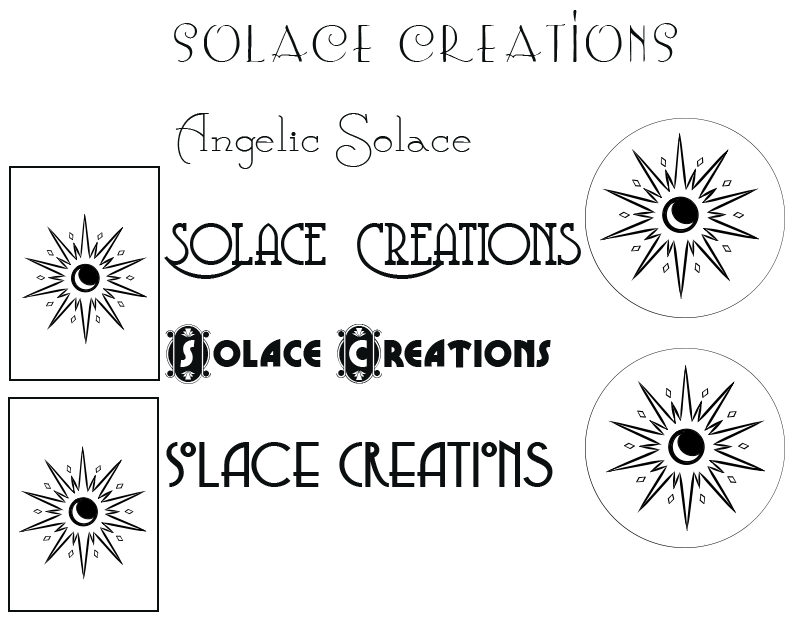
<style>
.page{position:relative;width:798px;height:628px;background:#ffffff}
.page>*{position:absolute;margin:0}
.t1{font:48px "LemonChicken";color:#0b0f10}
.t2{font:60px "CalamityJaneNF";color:#0b0f10}
.t3{font:60px "CoventryGardenNF";color:#0b0f10}
.t4{font:60px "CameoAppearanceNF";color:#0b0f10}
.t5{font:60px "CopaseticNF";color:#0b0f10}
</style>
<div class="page">
<p class="t1" style="left:174px;top:10px;width:503px;height:52px">Solace Creations</p>
<p class="t2" style="left:175px;top:113px;width:296px;height:56px">Angelic Solace</p>
<p class="t3" style="left:164px;top:223px;width:417px;height:56px">Solace Creations</p>
<p class="t4" style="left:165px;top:324px;width:386px;height:60px">Solace Creations</p>
<p class="t5" style="left:166px;top:440px;width:387px;height:47px">Solace Creations</p>
</div>
